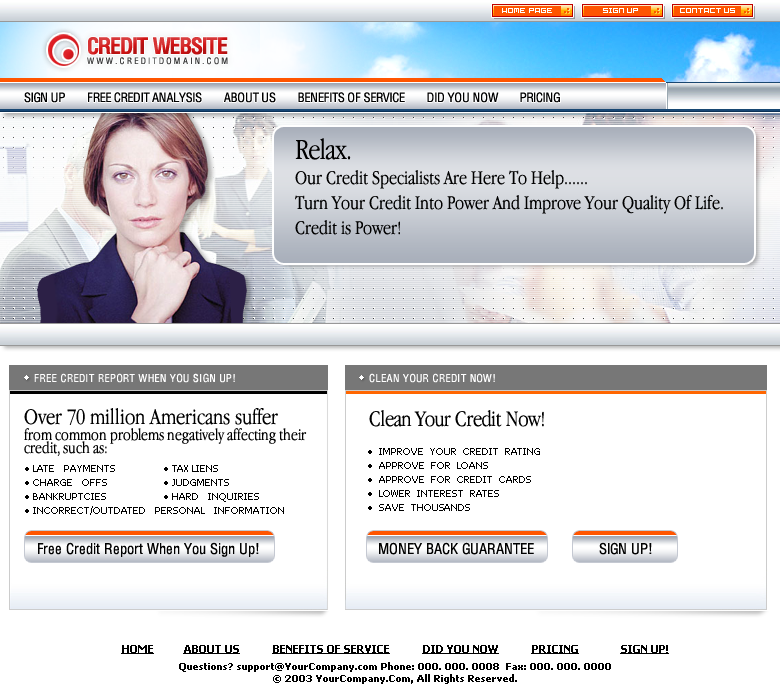
<style>
.page{position:relative;width:780px;height:700px;background:#ffffff}
.page>*{position:absolute;margin:0}
.t1{font:9px/10px "HeliosCond";letter-spacing:0.265em}
.t2{font:23px/10px "HeliosCond-Bold";letter-spacing:-0.04em}
.t3{font:13px "HeliosCond";letter-spacing:-0.02em;color:#000000}
.t4{font:20px/25px "AppleGaramondLight";color:#000000}
.t5{font:30px/28px "AppleGaramondLight";letter-spacing:-0.02em;color:#000000}
.t6{font:11px "HeliosCond";letter-spacing:0.045em;color:#ffffff}
.t7{font:17px/16px "AppleGaramondLight";color:#000000}
.t8{font:23px/12px "AppleGaramondLight";color:#000000}
.t9{font:17px/13px "AppleGaramondLight";color:#000000}
.t10{font:23px "AppleGaramondLight";letter-spacing:-0.02em;color:#000000}
.t11{font:9px/14px "Tahoma";color:#000000}
.t12{font:15px "HeliosCond";color:#000000}
.t13{font:10px/6px "Tahoma-Bold";color:#000000}
.t14{font:11px/15px "Tahoma-Bold";color:#000000;text-decoration:underline}
</style>
<div class="page">
<p class="t1" style="left:87px;top:37px;width:141px;height:28px"><span class="t2">CREDIT WEBSITE<br></span>WWW.CREDITDOMAIN.COM</p>
<p class="t3" style="left:24px;top:92px;width:536px;height:11px">SIGN UP        FREE CREDIT ANALYSIS        ABOUT US        BENEFITS OF SERVICE        DID YOU NOW        PRICING</p>
<p class="t4" style="left:295px;top:138px;width:428px;height:97px"><span class="t5">Relax.<br></span>Our Credit Specialists Are Here To Help......<br>Turn Your Credit Into Power And Improve Your Quality Of Life.<br>Credit is Power!</p>
<p class="t6" style="left:34px;top:373px;width:201px;height:10px">FREE CREDIT REPORT WHEN YOU SIGN UP!</p>
<p class="t6" style="left:369px;top:373px;width:126px;height:10px">CLEAN YOUR CREDIT NOW!</p>
<p class="t7" style="left:24px;top:408px;width:283px;height:48px"><span class="t8">Over 70 million Americans suffer<br></span>from common problems negatively affecting their<br><span class="t9">credit, such as:</span></p>
<p class="t10" style="left:369px;top:410px;width:175px;height:17px">Clean Your Credit Now!</p>
<p class="t11" style="left:368px;top:448px;width:172px;height:63px">●  IMPROVE  YOUR  CREDIT  RATING<br>●  APPROVE  FOR  LOANS<br>●  APPROVE  FOR  CREDIT  CARDS<br>●  LOWER  INTEREST  RATES<br>●  SAVE  THOUSANDS</p>
<p class="t11" style="left:25px;top:465px;width:259px;height:50px">● LATE   PAYMENTS                ● TAX LIENS<br>● CHARGE   OFFS                   ● JUDGMENTS<br>● BANKRUPTCIES                   ● HARD   INQUIRIES<br>● INCORRECT/OUTDATED   PERSONAL   INFORMATION</p>
<p class="t12" style="left:38px;top:542px;width:221px;height:15px">Free Credit Report When You Sign Up!</p>
<p class="t12" style="left:379px;top:542px;width:155px;height:13px">MONEY BACK GUARANTEE</p>
<p class="t12" style="left:599px;top:542px;width:53px;height:13px">SIGN UP!</p>
<p class="t13" style="left:121px;top:645px;width:548px;height:39px;text-align:center"><span class="t14">HOME          ABOUT US           BENEFITS OF SERVICE           DID YOU NOW           PRICING              SIGN UP!<br></span><br><br>Questions? support@YourCompany.com Phone: 000. 000. 0008  Fax: 000. 000. 0000<br><br>© 2003 YourCompany.Com, All Rights Reserved.</p>
</div>
